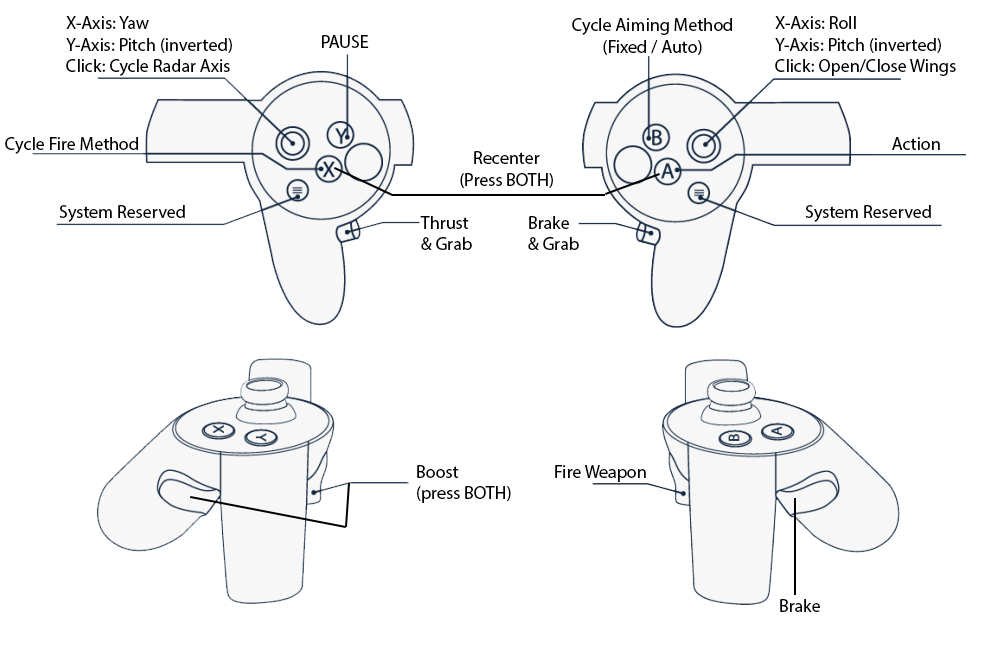
<style>
.page{position:relative;width:1000px;height:648px;background:#ffffff}
.page>*{position:absolute;margin:0}
.t1{font:18px "MyriadPro-Regular";color:#000000}
</style>
<div class="page">
<p class="t1" style="left:66px;top:16px;width:166px;height:60px">X-Axis: Yaw<br>Y-Axis: Pitch (inverted)<br>Click: Cycle Radar Axis</p>
<p class="t1" style="left:775px;top:16px;width:181px;height:60px">X-Axis: Roll<br>Y-Axis: Pitch (inverted)<br>Click: Open/Close Wings</p>
<p class="t1" style="left:572px;top:18px;width:160px;height:37px;text-align:center">Cycle Aiming Method<br>(Fixed / Auto)</p>
<p class="t1" style="left:322px;top:35px;width:47px;height:13px">PAUSE</p>
<p class="t1" style="left:5px;top:137px;width:133px;height:17px">Cycle Fire Method</p>
<p class="t1" style="left:892px;top:137px;width:48px;height:13px">Action</p>
<p class="t1" style="left:460px;top:151px;width:93px;height:37px;text-align:center">Recenter (Press BOTH)</p>
<p class="t1" style="left:59px;top:205px;width:126px;height:17px">System Reserved</p>
<p class="t1" style="left:805px;top:205px;width:126px;height:17px">System Reserved</p>
<p class="t1" style="left:420px;top:216px;width:52px;height:34px">Thrust <br>&amp; Grab</p>
<p class="t1" style="left:528px;top:216px;width:51px;height:34px">Brake<br>&amp; Grab</p>
<p class="t1" style="left:417px;top:465px;width:94px;height:38px">Boost<br>(press BOTH)</p>
<p class="t1" style="left:555px;top:465px;width:91px;height:17px">Fire Weapon</p>
<p class="t1" style="left:780px;top:599px;width:40px;height:13px">Brake</p>
</div>
